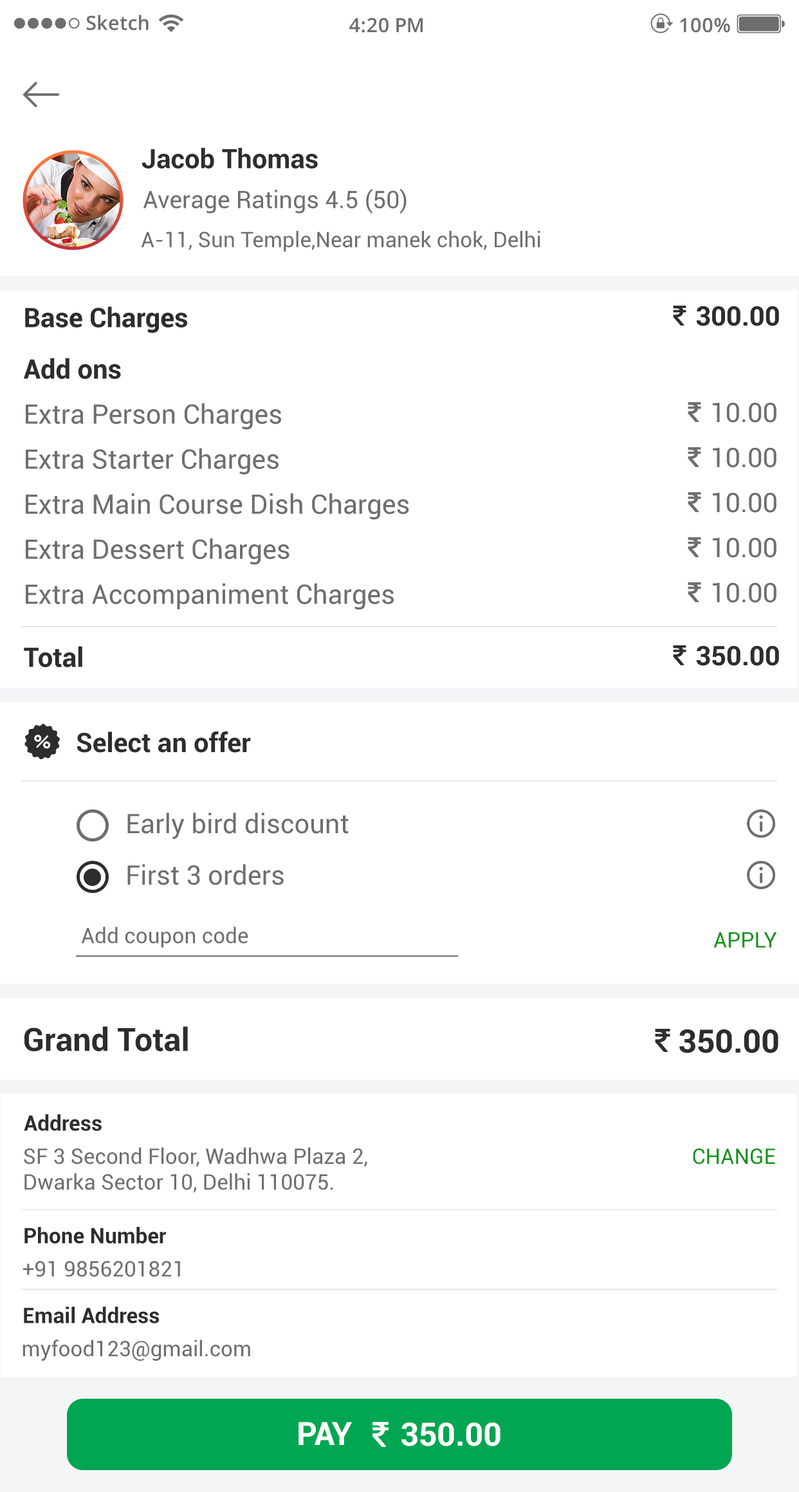
<style>
.page{position:relative;width:799px;height:1492px;background:#ffffff}
.page>*{position:absolute;margin:0}
.t1{font:19.6px "OpenSans-Semibold";color:#6e6e6e}
.t2{font:26.8px "Roboto-Bold";color:#2d2d2d}
.t3{font:24.1px "Roboto-Regular";color:#6e6e6e}
.t4{font:21.4px "Roboto-Regular";color:#6e6e6e}
.t5{font:26.8px "Roboto-Regular";color:#6e6e6e}
.t6{font:21.4px "Roboto-Regular";color:#109318}
.t7{font:32.2px "Roboto-Bold";color:#2d2d2d}
.t8{font:21.4px "Roboto-Bold";color:#2d2d2d}
.t9{font:32.2px "Roboto-Bold";color:#ffffff}
</style>
<div class="page">
<p class="t1" style="left:86px;top:15px;width:63px;height:15px">Sketch</p>
<p class="t1" style="left:349px;top:18px;width:74px;height:15px">4:20 PM</p>
<p class="t1" style="left:680px;top:18px;width:50px;height:15px">100%</p>
<p class="t2" style="left:142px;top:147px;width:176px;height:22px">Jacob Thomas</p>
<p class="t3" style="left:143px;top:189px;width:264px;height:25px">Average Ratings 4.5 (50)</p>
<p class="t4" style="left:141px;top:230px;width:399px;height:22px">A-11, Sun Temple,Near manek chok, Delhi</p>
<p class="t2" style="left:25px;top:306px;width:162px;height:27px">Base Charges</p>
<p class="t2" style="left:696px;top:306px;width:83px;height:20px">300.00</p>
<p class="t2" style="left:24px;top:358px;width:97px;height:21px">Add ons</p>
<p class="t5" style="left:26px;top:403px;width:255px;height:27px">Extra Person Charges</p>
<p class="t5" style="left:713px;top:403px;width:64px;height:20px">10.00</p>
<p class="t5" style="left:26px;top:448px;width:253px;height:27px">Extra Starter Charges</p>
<p class="t5" style="left:713px;top:448px;width:64px;height:20px">10.00</p>
<p class="t5" style="left:26px;top:493px;width:383px;height:27px">Extra Main Course Dish Charges</p>
<p class="t5" style="left:713px;top:493px;width:64px;height:20px">10.00</p>
<p class="t5" style="left:26px;top:538px;width:264px;height:27px">Extra Dessert Charges</p>
<p class="t5" style="left:713px;top:538px;width:64px;height:20px">10.00</p>
<p class="t5" style="left:26px;top:583px;width:368px;height:27px">Extra Accompaniment Charges</p>
<p class="t5" style="left:713px;top:583px;width:64px;height:20px">10.00</p>
<p class="t2" style="left:24px;top:646px;width:58px;height:21px">Total</p>
<p class="t2" style="left:696px;top:646px;width:83px;height:20px">350.00</p>
<p class="t2" style="left:77px;top:731px;width:174px;height:22px">Select an offer</p>
<p class="t5" style="left:127px;top:813px;width:222px;height:26px">Early bird discount</p>
<p class="t5" style="left:127px;top:864px;width:157px;height:21px">First 3 orders</p>
<p class="t4" style="left:81px;top:927px;width:167px;height:21px">Add coupon code</p>
<p class="t6" style="left:714px;top:932px;width:63px;height:16px">APPLY</p>
<p class="t7" style="left:24px;top:1026px;width:164px;height:25px">Grand Total</p>
<p class="t7" style="left:679px;top:1029px;width:100px;height:24px">350.00</p>
<p class="t8" style="left:24px;top:1114px;width:78px;height:17px">Address</p>
<p class="t4" style="left:24px;top:1147px;width:343px;height:46px">SF 3 Second Floor, Wadhwa Plaza 2, <br>Dwarka Sector 10, Delhi 110075.</p>
<p class="t6" style="left:693px;top:1149px;width:82px;height:16px">CHANGE</p>
<p class="t8" style="left:24px;top:1227px;width:143px;height:17px">Phone Number</p>
<p class="t4" style="left:23px;top:1261px;width:157px;height:16px">+91 9856201821</p>
<p class="t8" style="left:24px;top:1307px;width:136px;height:17px">Email Address</p>
<p class="t4" style="left:23px;top:1340px;width:227px;height:21px">myfood123@gmail.com</p>
<p class="t9" style="left:299px;top:1422px;width:53px;height:23px">PAY</p>
<p class="t9" style="left:402px;top:1423px;width:99px;height:23px">350.00</p>
</div>
